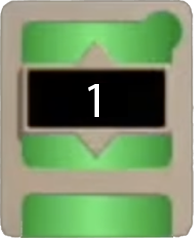
<style>
.page{position:relative;width:194px;height:238px}
.page>*{position:absolute;margin:0}
.t1{font:50px "MyriadPro-Regular";color:#ffffff}
</style>
<div class="page">
<p class="t1" style="left:88px;top:84px;width:11px;height:33px">1</p>
</div>
